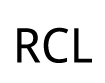
<style>
.page{position:relative;width:105px;height:83px;background:#ffffff}
.page>*{position:absolute;margin:0}
.t1{font:47.9px "DroidSans";color:#000000}
</style>
<div class="page">
<p class="t1" style="left:17px;top:27px;width:75px;height:36px">RCL</p>
</div>
